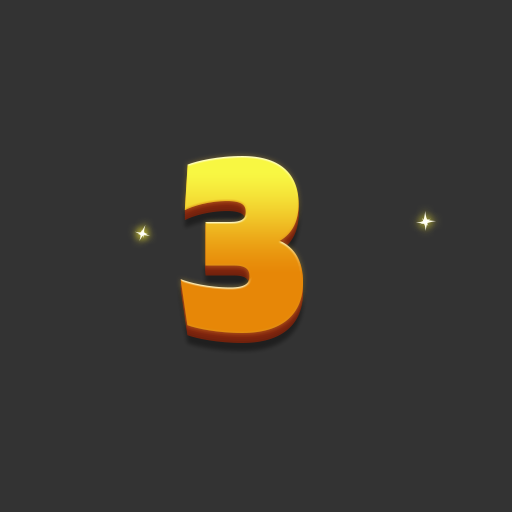
<style>
.page{position:relative;width:512px;height:512px;background:#333333}
.page>*{position:absolute;margin:0}
.t1{font:244.9px "Gilam-BlackDEMO";letter-spacing:-0.005em;scale:0.95 1}
</style>
<div class="page">
<p class="t1" style="left:180px;top:156px;width:123px;height:177px">3</p>
</div>
